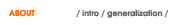
<style>
.page{position:relative;width:180px;height:25px;background:#ffffff}
.page>*{position:absolute;margin:0}
.t1{font:8px "Atlanta-Demi";color:#ff6600}
.t2{font:8px "Atlanta-Demi";color:#666666}
</style>
<div class="page">
<p class="t1" style="left:9px;top:9px;width:26px;height:8px">ABOUT</p>
<p class="t2" style="left:76px;top:10px;width:93px;height:8px"><span class="t1"> </span>/ intro / generalization /</p>
</div>
